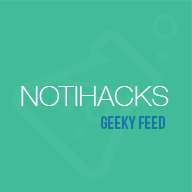
<style>
.page{position:relative;width:192px;height:192px;background:#41bb98}
.page>*{position:absolute;margin:0}
.t1{font:28.4px "HelveticaNeue-Thin";color:#ffffff}
.t2{font:18px "BebasNeue";color:#1975a5}
</style>
<div class="page">
<p class="t1" style="left:21px;top:86px;width:148px;height:20px">NOTIHACKS</p>
<p class="t2" style="left:101px;top:116px;width:64px;height:13px">geeky feed</p>
</div>
